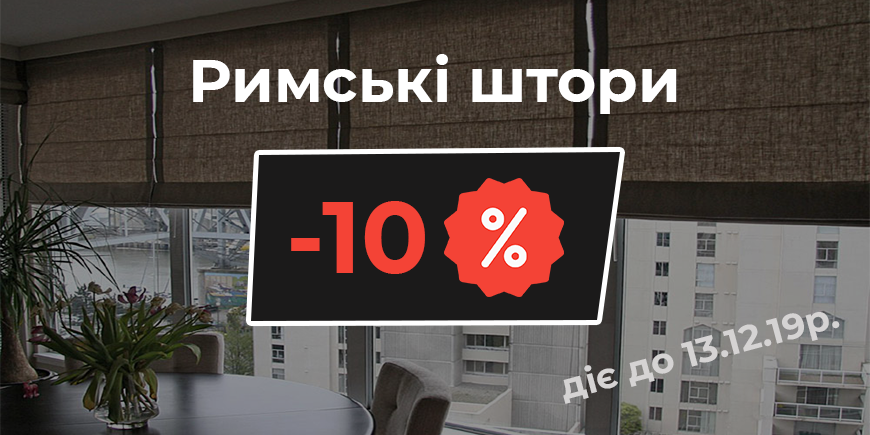
<style>
.page{position:relative;width:870px;height:435px}
.page>*{position:absolute;margin:0}
.t1{font:60px "Montserrat-Bold";color:#ffffff}
.t2{font:100px "Montserrat-Bold";color:#f44336}
.t3{font:36px "Montserrat-Bold";color:#d5d3d3}
</style>
<div class="page">
<p class="t1" style="left:193px;top:54px;width:484px;height:60px">Римські штори</p>
<p class="t2" style="left:291px;top:201px;width:134px;height:73px">-10</p>
<p class="t3" style="left:563px;top:312px;width:277px;height:92px;rotate:-15deg">діє до 13.12.19р.</p>
</div>
